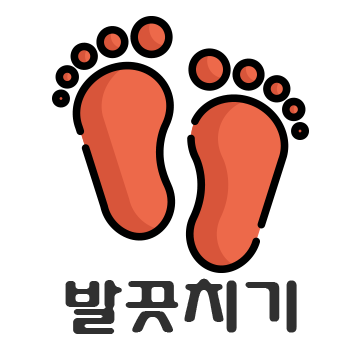
<style>
.page{position:relative;width:362px;height:362px;background:#ffffff}
.page>*{position:absolute;margin:0}
.t1{font:60px "HYdnkB";color:#303030}
</style>
<div class="page">
<p class="t1" style="left:65px;top:278px;width:232px;height:56px">발끗치기</p>
</div>
